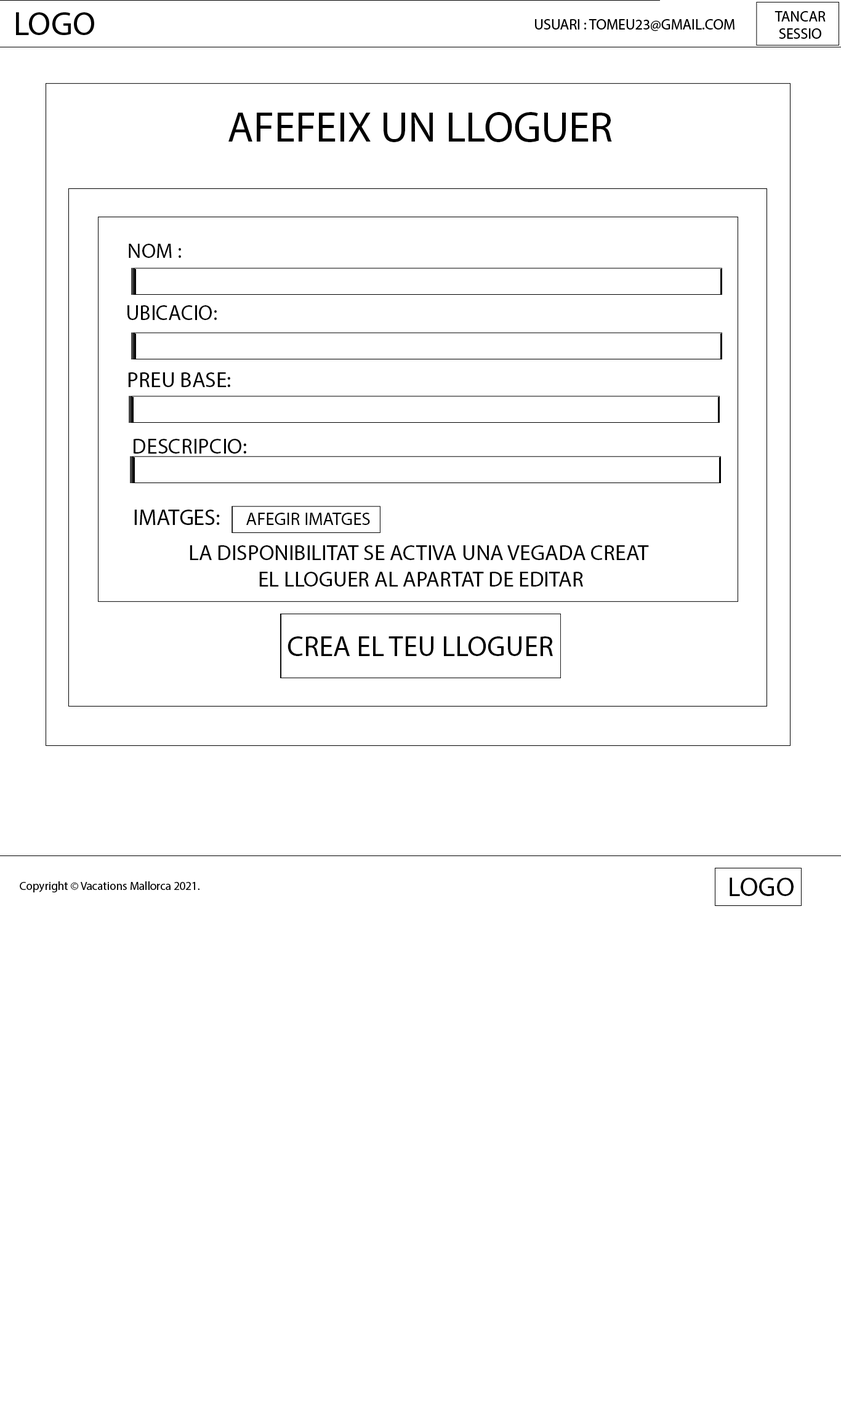
<style>
.page{position:relative;width:841px;height:1418px;background:#ffffff}
.page>*{position:absolute;margin:0}
.t1{font:42.7px "MyriadPro-Regular";color:#000000}
.t2{font:20.9px "MyriadPro-Regular";color:#000000}
.t3{font:21.2px "MyriadPro-Regular";color:#000000}
.t4{font:21.9px "MyriadPro-Regular";color:#000000}
.t5{font:21.8px "MyriadPro-Regular";color:#000000}
.t6{font:22.5px "MyriadPro-Regular";color:#000000}
.t7{font:18.1px "MyriadPro-Regular";color:#000000}
.t8{font:22px "MyriadPro-Regular";color:#000000}
.t9{font:28.5px "MyriadPro-Regular";color:#000000}
</style>
<div class="page">
<p class="t1" style="left:228px;top:112px;width:384px;height:30px">AFEFEIX UN LLOGUER</p>
<p class="t2" style="left:129px;top:244px;width:52px;height:14px">NOM :</p>
<p class="t3" style="left:127px;top:305px;width:90px;height:15px">UBICACIO:</p>
<p class="t4" style="left:128px;top:372px;width:102px;height:15px">PREU BASE:</p>
<p class="t5" style="left:134px;top:439px;width:112px;height:15px">DESCRIPCIO:</p>
<p class="t6" style="left:134px;top:510px;width:86px;height:15px">IMATGES:</p>
<p class="t7" style="left:246px;top:513px;width:124px;height:12px">AFEGIR IMATGES</p>
<p class="t8" style="left:190px;top:545px;width:459px;height:42px;text-align:center">LA DISPONIBILITAT SE ACTIVA UNA VEGADA CREAT <br>EL LLOGUER AL APARTAT DE EDITAR</p>
<p class="t9" style="left:287px;top:636px;width:266px;height:20px">CREA EL TEU LLOGUER</p>
</div>
